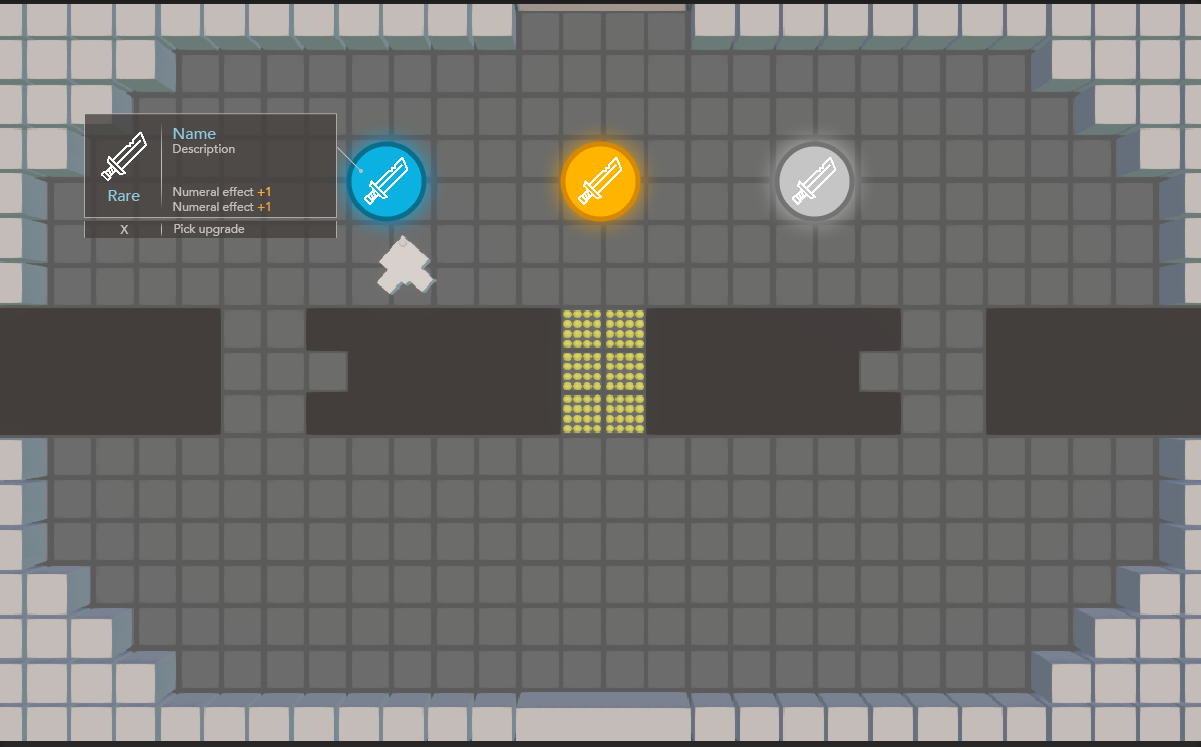
<style>
.page{position:relative;width:1201px;height:747px;background:#6c6c6a}
.page>*{position:absolute;margin:0}
.t1{font:12px "Avenir-Medium";color:#c4bcb8}
.t2{font:16px "Avenir-Medium";color:#90c9da}
.t3{font:12px "Avenir-Medium";color:#ffab33}
.t4{font:12px "Avenir-Medium";color:#eca035}
</style>
<div class="page">
<p class="t1" style="left:173px;top:128px;width:97px;height:83px"><span class="t2">Name<br></span>Description<br><br><br>Numeral effect <span class="t3">+1<br></span>Numeral effect <span class="t4">+1</span></p>
<p class="t2" style="left:108px;top:190px;width:32px;height:11px">Rare</p>
<p class="t1" style="left:120px;top:225px;width:9px;height:9px">X</p>
<p class="t1" style="left:174px;top:224px;width:71px;height:12px">Pick upgrade</p>
</div>
